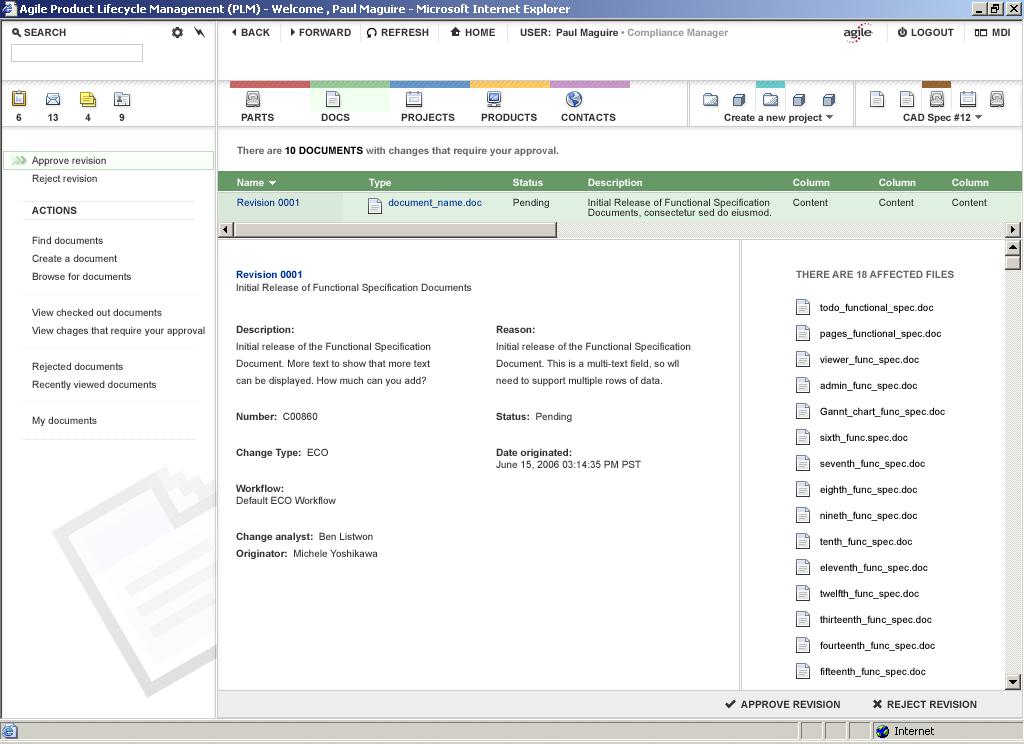
<style>
.page{position:relative;width:1024px;height:744px;background:#ffffff}
.page>*{position:absolute;margin:0}
.t1{font:10px "Arial-BoldMT";color:#666666}
.t2{font:10px "Arial-BoldMT";color:#000000}
.t3{font:10px/18px "ArialMT";color:#333333}
.t4{font:10px/10px "ArialMT";color:#333333}
.t5{font:10px "Arial-BoldMT";color:#ffffff}
.t6{font:10px/8px "Arial-BoldMT";color:#ffffff}
.t7{font:10px "Arial-BoldMT";color:#333333}
.t8{font:10px/13px "ArialMT";color:#333333}
.t9{font:10px/12px "Arial-BoldMT";color:#003399}
.t10{font:10px/26px "ArialMT";color:#000000}
.t11{font:10px/12px "ArialMT";color:#333333}
.t12{font:10px/12px "Arial-BoldMT";color:#333333}
</style>
<div class="page">
<p class="t1" style="left:237px;top:146px;width:322px;height:10px">There are <span class="t2">10 DOCUMENTS </span>with changes that require your approval.</p>
<p class="t3" style="left:32px;top:156px;width:74px;height:28px">Approve revision<br>Reject revision</p>
<p class="t4" style="left:588px;top:178px;width:183px;height:40px"><span class="t5">De</span><span class="t6">scription<br></span><br>Initial Release of Functional Specification<br>Documents, consectetur sed do eiusmod.</p>
<p class="t7" style="left:32px;top:206px;width:45px;height:8px">ACTIONS</p>
<p class="t3" style="left:32px;top:236px;width:173px;height:190px">Find documents<br>Create a document<br>Browse for documents<br><br>View checked out documents<br>View chages that require your approval<br><br>Rejected documents<br>Recently viewed documents<br><br>My documents</p>
<p class="t8" style="left:236px;top:270px;width:236px;height:23px"><span class="t9">Revision 0001<br></span>Initial Release of Functional Specification Documents</p>
<p class="t1" style="left:796px;top:270px;width:158px;height:8px">THERE ARE 18 AFFECTED FILES</p>
<p class="t10" style="left:820px;top:303px;width:125px;height:374px">todo_functional_spec.doc<br>pages_functional_spec.doc<br>viewer_func_spec.doc<br>admin_func_spec.doc<br>Gannt_chart_func_spec.doc<br>sixth_func.spec.doc<br>seventh_func_spec.doc<br>eighth_func_spec.doc<br>nineth_func_spec.doc<br>tenth_func_spec.doc<br>eleventh_func_spec.doc<br>twelfth_func_spec.doc<br>thirteenth_func_spec.doc<br>fourteenth_func_spec.doc<br>fifteenth_func_spec.doc</p>
<p class="t11" style="left:236px;top:325px;width:195px;height:234px"><span class="t12">Description:<br></span>Initial release of the Functional Specification<br>Document. More text to show that more text<br>can be displayed. How much can you add?<br><span class="t12"><br><br>Number:  </span>C00860<br><span class="t12"><br><br>Change Type:  </span>ECO<br><br><span class="t12"><br>Workflow:<br></span>Default ECO Workflow<br><br><span class="t12"><br>Change analyst:  </span>Ben Listwon<span class="t12"><br>Originator:  </span>Michele Yoshikawa</p>
<p class="t11" style="left:496px;top:325px;width:195px;height:145px"><span class="t12">Reason:<br></span>Initial release of the Functional Specification<br>Document. This is a multi-text field, so wll<br>need to support multiple rows of data.<br><span class="t12"><br><br>Status:  </span>Pending<br><span class="t12"><br><br>Date originated:  <br></span>June 15, 2006 03:14:35 PM PST</p>
<p class="t7" style="left:741px;top:700px;width:99px;height:8px">APPROVE REVISION</p>
<p class="t7" style="left:887px;top:700px;width:90px;height:8px">REJECT REVISION</p>
</div>
